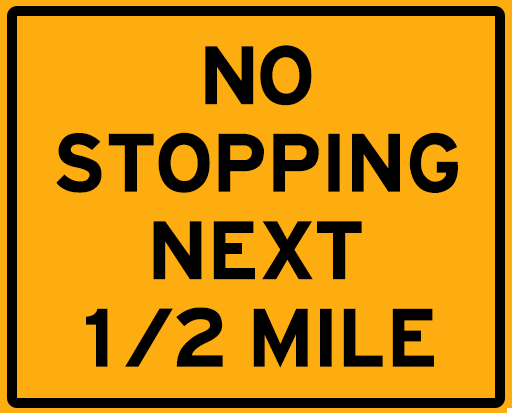
<style>
.page{position:relative;width:512px;height:413px;background:#fead10}
.page>*{position:absolute;margin:0}
.t1{font:87.5px/87.5px "HittheRoad";color:#000000}
</style>
<div class="page">
<p class="t1" style="left:56px;top:45px;width:402px;height:323px;text-align:center">NO<br>STOPPING<br>NEXT<br>1/2 MILE</p>
</div>
